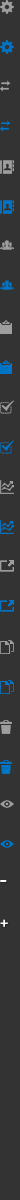
<style>
.page{position:relative;width:20px;height:1200px;background:#333333}
.page>*{position:absolute;margin:0}
.t1{font:20px "ArialMT";letter-spacing:-0.05em;color:#ffffff;font-weight:bold}
.t2{font:14px "ArialMT";letter-spacing:-0.05em;color:#ffffff;font-weight:bold}
</style>
<div class="page">
<p class="t1" style="left:0px;top:880px;width:7px;height:2px">-</p>
<p class="t2" style="left:0px;top:919px;width:8px;height:8px">+</p>
</div>
